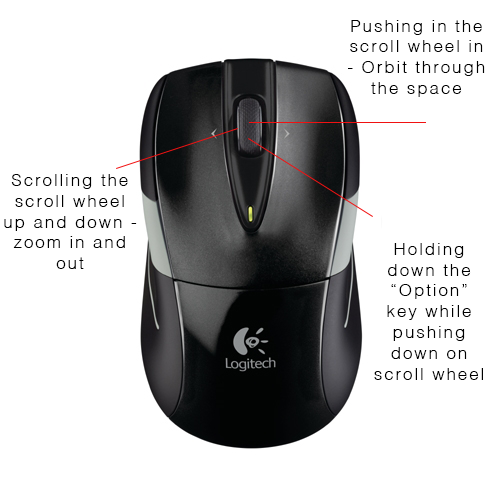
<style>
.page{position:relative;width:500px;height:500px;background:#ffffff}
.page>*{position:absolute;margin:0}
.t1{font:17.3px "Helvetica-Light";letter-spacing:0.1em;color:#000000}
</style>
<div class="page">
<p class="t1" style="left:348px;top:20px;width:137px;height:77px;text-align:center">Pushing in the scroll wheel in - Orbit through the space</p>
<p class="t1" style="left:4px;top:174px;width:133px;height:95px;text-align:center">Scrolling the scroll wheel up and down - zoom in and out</p>
<p class="t1" style="left:374px;top:243px;width:109px;height:137px;text-align:center">Holding down the “Option” key while pushing down on scroll wheel - pan through space</p>
</div>
